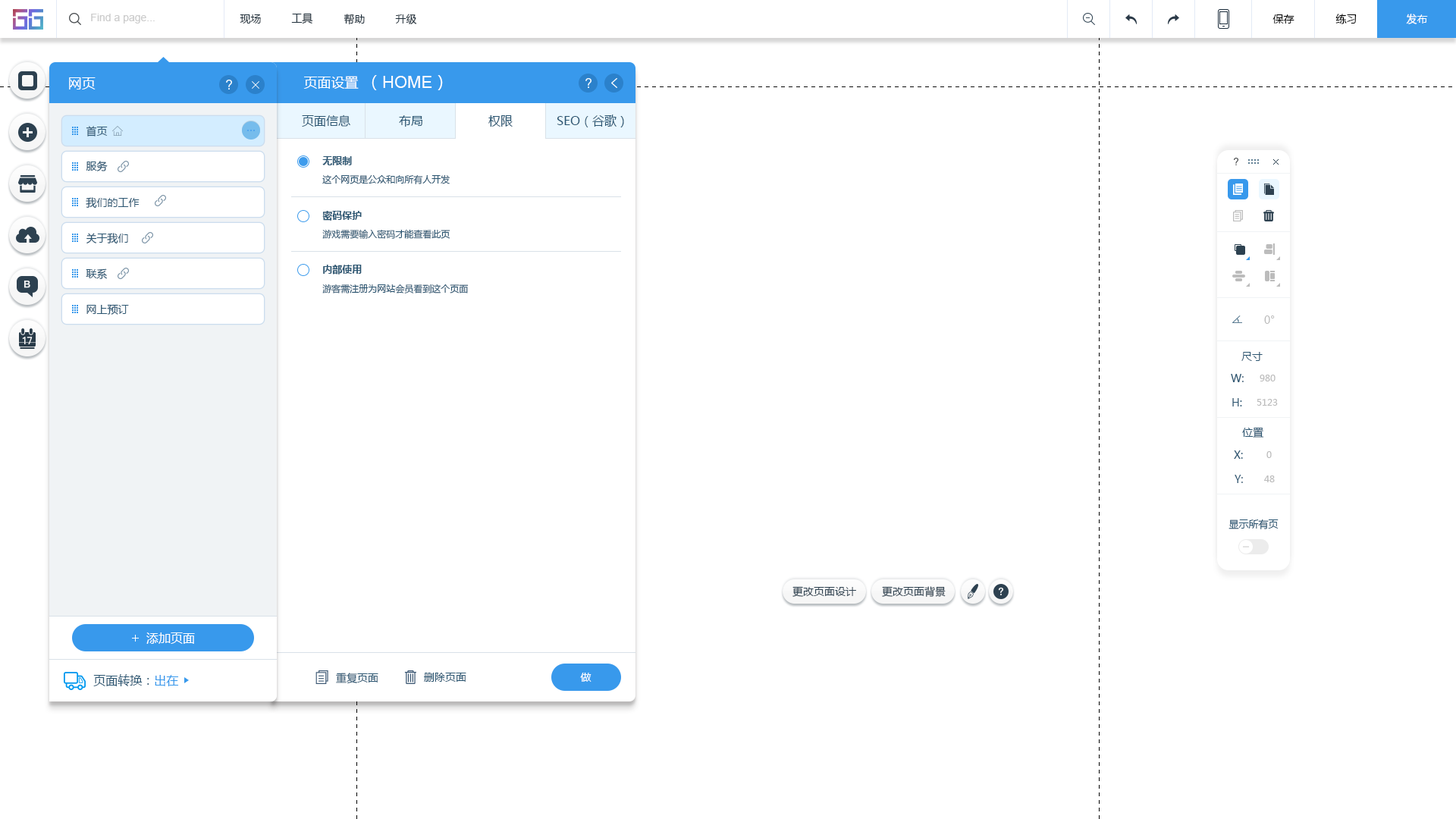
<style>
.page{position:relative;width:1456px;height:819px;background:#ffffff}
.page>*{position:absolute;margin:0}
.t1{font:10.6px "ArialMT";color:#cccccc}
.t2{font:10.6px "MicrosoftYaHei";color:#20303c}
.t3{font:10.6px "MicrosoftYaHei";color:#000000}
.t4{font:10.6px "MicrosoftYaHei";color:#ffffff}
.t5{font:13.6px "MicrosoftYaHei";color:#ffffff}
.t6{font:16.7px "ArialMT";color:#ffffff}
.t7{font:16.7px "MicrosoftYaHei";color:#ffffff}
.t8{font:10.6px "MicrosoftYaHei";color:#2b5672}
.t9{font:12.1px "MicrosoftYaHei";color:#2b5672}
.t10{font:9.9px "MicrosoftYaHei-Bold";color:#2b5672}
.t11{font:9.1px "MicrosoftYaHei";color:#2b5672}
.t12{font:10.6px "MicrosoftYaHei";color:#bcbcbc}
.t13{font:9.1px "MicrosoftYaHei";color:#bcbcbc}
.t14{font:9.9px "MicrosoftYaHei";color:#2b5672}
.t15{font:10.6px "MicrosoftYaHei";color:#2d4150}
.t16{font:12.1px "MicrosoftYaHei";color:#ffffff}
.t17{font:9.1px "MicrosoftYaHei";color:#3899ec}
</style>
<div class="page">
<p class="t1" style="left:91px;top:14px;width:64px;height:10px">Find a page...</p>
<p class="t2" style="left:240px;top:14px;width:21px;height:10px">现场</p>
<p class="t2" style="left:291px;top:13px;width:22px;height:11px">工具</p>
<p class="t2" style="left:344px;top:14px;width:21px;height:11px">帮助</p>
<p class="t2" style="left:395px;top:14px;width:22px;height:10px">升级</p>
<p class="t3" style="left:1272px;top:14px;width:22px;height:10px">保存</p>
<p class="t3" style="left:1335px;top:14px;width:22px;height:10px">练习</p>
<p class="t4" style="left:1406px;top:14px;width:22px;height:10px">发布</p>
<p class="t5" style="left:69px;top:77px;width:27px;height:12px">网页</p>
<p class="t5" style="left:303px;top:76px;width:56px;height:13px">页面设置</p>
<p class="t6" style="left:372px;top:75px;width:71px;height:15px"><span class="t7">（</span>HOME<span class="t7">）</span></p>
<p class="t8" style="left:86px;top:126px;width:22px;height:10px">首页</p>
<p class="t9" style="left:302px;top:115px;width:48px;height:12px">页面信息</p>
<p class="t9" style="left:399px;top:115px;width:23px;height:12px">布局</p>
<p class="t9" style="left:488px;top:115px;width:25px;height:12px">权限</p>
<p class="t9" style="left:557px;top:115px;width:67px;height:12px">SEO（谷歌）</p>
<p class="t8" style="left:86px;top:161px;width:22px;height:10px">服务</p>
<p class="t10" style="left:322px;top:156px;width:30px;height:9px">无限制</p>
<p class="t11" style="left:322px;top:174px;width:128px;height:10px">这个网页是公众和向所有人开发</p>
<p class="t8" style="left:86px;top:197px;width:54px;height:12px">我们的工作</p>
<p class="t10" style="left:322px;top:211px;width:40px;height:10px">密码保护</p>
<p class="t8" style="left:86px;top:233px;width:42px;height:11px">关于我们</p>
<p class="t11" style="left:322px;top:229px;width:128px;height:10px">游戏需要输入密码才能查看此页</p>
<p class="t8" style="left:86px;top:268px;width:21px;height:11px">联系</p>
<p class="t10" style="left:323px;top:265px;width:39px;height:10px">内部使用</p>
<p class="t11" style="left:322px;top:284px;width:147px;height:9px">游客需注册为网站会员看到这个页面</p>
<p class="t8" style="left:86px;top:304px;width:43px;height:11px">网上预订</p>
<p class="t12" style="left:1264px;top:315px;width:11px;height:9px">0°</p>
<p class="t8" style="left:1241px;top:352px;width:22px;height:9px">尺寸</p>
<p class="t8" style="left:1231px;top:374px;width:13px;height:8px">W:</p>
<p class="t13" style="left:1260px;top:375px;width:15px;height:6px">980</p>
<p class="t8" style="left:1232px;top:398px;width:10px;height:8px">H:</p>
<p class="t13" style="left:1257px;top:399px;width:21px;height:7px">5123</p>
<p class="t8" style="left:1242px;top:427px;width:22px;height:11px">位置</p>
<p class="t8" style="left:1234px;top:450px;width:9px;height:9px">X:</p>
<p class="t13" style="left:1266px;top:451px;width:6px;height:7px">0</p>
<p class="t8" style="left:1235px;top:475px;width:8px;height:8px">Y:</p>
<p class="t13" style="left:1264px;top:475px;width:11px;height:7px">48</p>
<p class="t14" style="left:1228px;top:519px;width:51px;height:10px">显示所有页</p>
<p class="t15" style="left:792px;top:586px;width:64px;height:11px">更改页面设计</p>
<p class="t15" style="left:882px;top:586px;width:64px;height:11px">更改页面背景</p>
<p class="t16" style="left:146px;top:632px;width:49px;height:12px">添加页面</p>
<p class="t11" style="left:93px;top:674px;width:86px;height:12px">页面转换：<span class="t17">出在</span></p>
<p class="t8" style="left:336px;top:673px;width:42px;height:11px">重复页面</p>
<p class="t8" style="left:424px;top:673px;width:42px;height:9px">删除页面</p>
<p class="t4" style="left:580px;top:673px;width:11px;height:9px">做</p>
</div>
